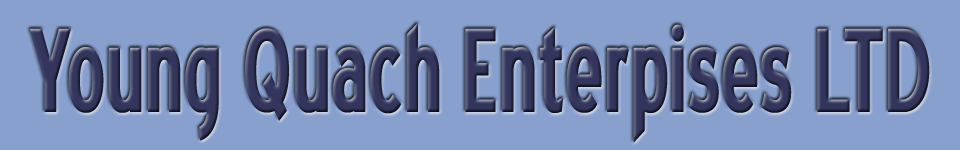
<style>
.page{position:relative;width:960px;height:150px;background:#88a0cd}
.page>*{position:absolute;margin:0}
.t1{font:150px "BlueHighwayCondensed";color:#33355c}
</style>
<div class="page">
<p class="t1" style="left:29px;top:22px;width:901px;height:121px">Young Quach Enterpises LTD</p>
</div>
